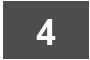
<style>
.page{position:relative;width:90px;height:60px;background:#4d4d4d}
.page>*{position:absolute;margin:0}
.t1{font:36px "Arial-BoldMT";color:#fafafa}
</style>
<div class="page">
<p class="t1" style="left:36px;top:19px;width:20px;height:26px">4</p>
</div>
